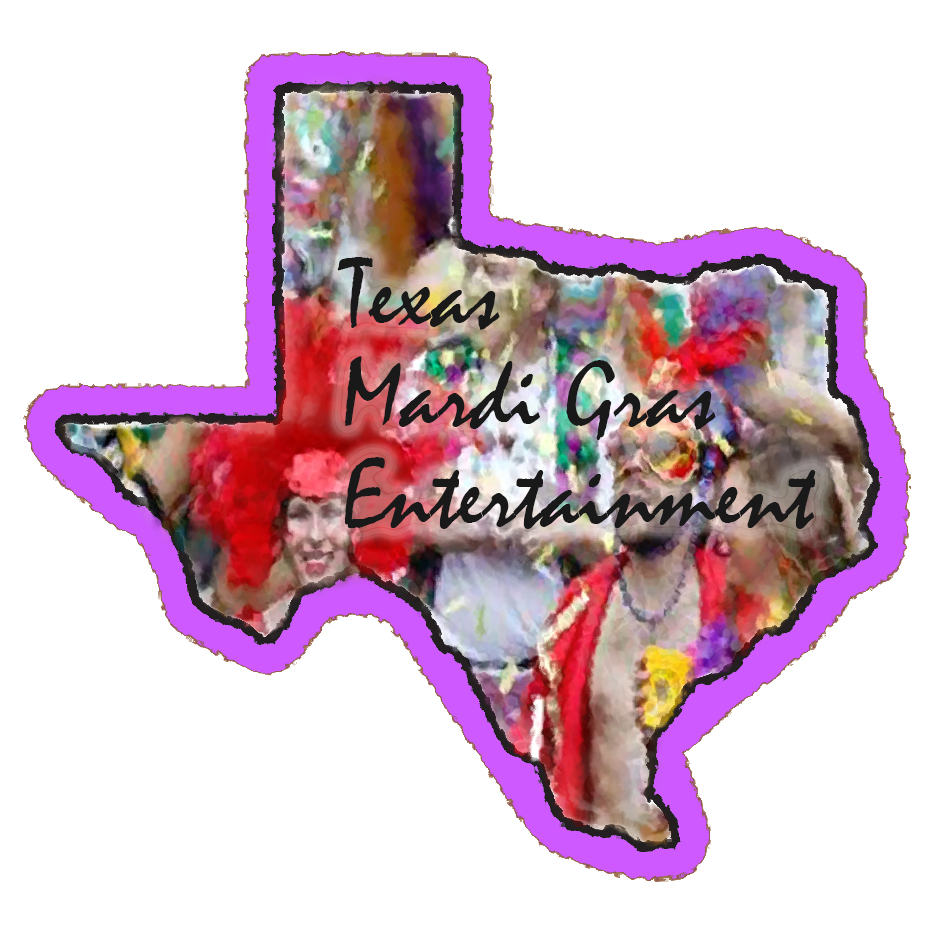
<style>
.page{position:relative;width:930px;height:930px;background:#ffffff}
.page>*{position:absolute;margin:0}
.t1{font:100px/100px "Mistral";color:#1a191a}
</style>
<div class="page">
<p class="t1" style="left:337px;top:257px;width:479px;height:272px">Texas<br>Mardi Gras<br>Entertainment</p>
</div>
